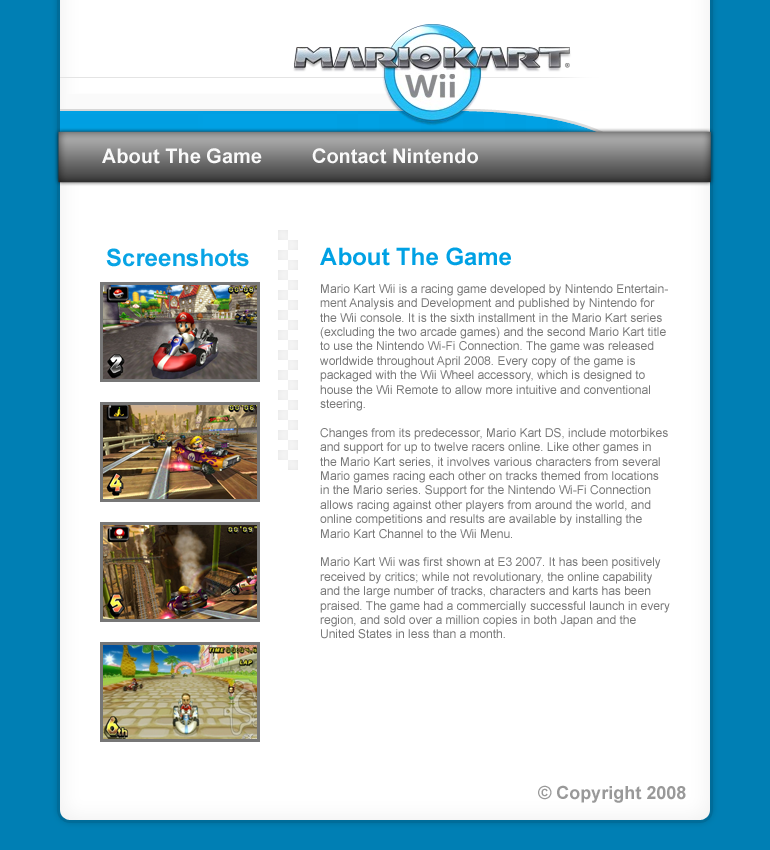
<style>
.page{position:relative;width:770px;height:850px;background:#ffffff}
.page>*{position:absolute;margin:0}
.t1{font:20px "Arial-BoldMT";color:#fafafa}
.t2{font:24px "Arial-BoldMT";color:#08a4e5}
.t3{font:12px "ArialMT";color:#777777}
.t4{font:24px "Arial-BoldMT";color:#00a1e4}
.t5{font:18px "Arial-BoldMT";color:#999999}
</style>
<div class="page">
<p class="t1" style="left:102px;top:148px;width:376px;height:16px">About The Game         Contact Nintendo</p>
<p class="t2" style="left:106px;top:248px;width:143px;height:19px">Screenshots</p>
<p class="t3" style="left:320px;top:247px;width:350px;height:392px"><span class="t4">About The Game<br> <br></span>Mario Kart Wii is a racing game developed by Nintendo Entertainment Analysis and Development and published by Nintendo for the Wii console. It is the sixth installment in the Mario Kart series (excluding the two arcade games) and the second Mario Kart title to use the Nintendo Wi-Fi Connection. The game was released worldwide throughout April 2008. Every copy of the game is packaged with the Wii Wheel accessory, which is designed to house the Wii Remote to allow more intuitive and conventional steering.<br><br>Changes from its predecessor, Mario Kart DS, include motorbikes and support for up to twelve racers online. Like other games in the Mario Kart series, it involves various characters from several Mario games racing each other on tracks themed from locations in the Mario series. Support for the Nintendo Wi-Fi Connection allows racing against other players from around the world, and online competitions and results are available by installing the Mario Kart Channel to the Wii Menu.<br><br>Mario Kart Wii was first shown at E3 2007. It has been positively received by critics; while not revolutionary, the online capability and the large number of tracks, characters and karts has been praised. The game had a commercially successful launch in every region, and sold over a million copies in both Japan and the United States in less than a month.</p>
<p class="t5" style="left:538px;top:785px;width:148px;height:18px">© Copyright 2008</p>
</div>
